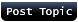
<style>
.page{position:relative;width:78px;height:22px;background:#000000}
.page>*{position:absolute;margin:0}
.t1{font:11px "LucidaConsole";color:#ffffff}
</style>
<div class="page">
<p class="t1" style="left:7px;top:6px;width:65px;height:11px">Post Topic</p>
</div>
